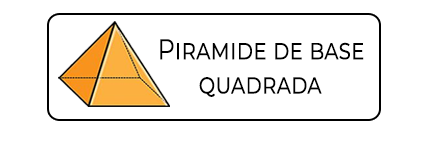
<style>
.page{position:relative;width:426px;height:141px;background:#ffffff}
.page>*{position:absolute;margin:0}
.t1{font:28.5px "Montserrat-Regular";color:#000000;font-variant:small-caps;scale:0.83 1}
</style>
<div class="page">
<p class="t1" style="left:160px;top:39px;width:204px;height:58px">Piramide de base <br>   quadrada</p>
</div>
